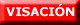
<style>
.page{position:relative;width:80px;height:25px;background:#ff0000}
.page>*{position:absolute;margin:0}
.t1{font:12px "Verdana-Bold";color:#ffffff}
</style>
<div class="page">
<p class="t1" style="left:6px;top:4px;width:69px;height:13px">VISACIÓN</p>
</div>
